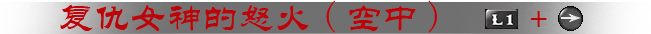
<style>
.page{position:relative;width:651px;height:34px;background:#707070}
.page>*{position:absolute;margin:0}
.t1{font:36px "STLiti";color:#ba060b}
.t2{font:36px "FangSong";color:#ba060b}
</style>
<div class="page">
<p class="t1" style="left:60px;top:0px;width:487px;height:33px">复仇女神的怒火<span class="t2">(</span>空中<span class="t2">)</span>   +</p>
</div>
